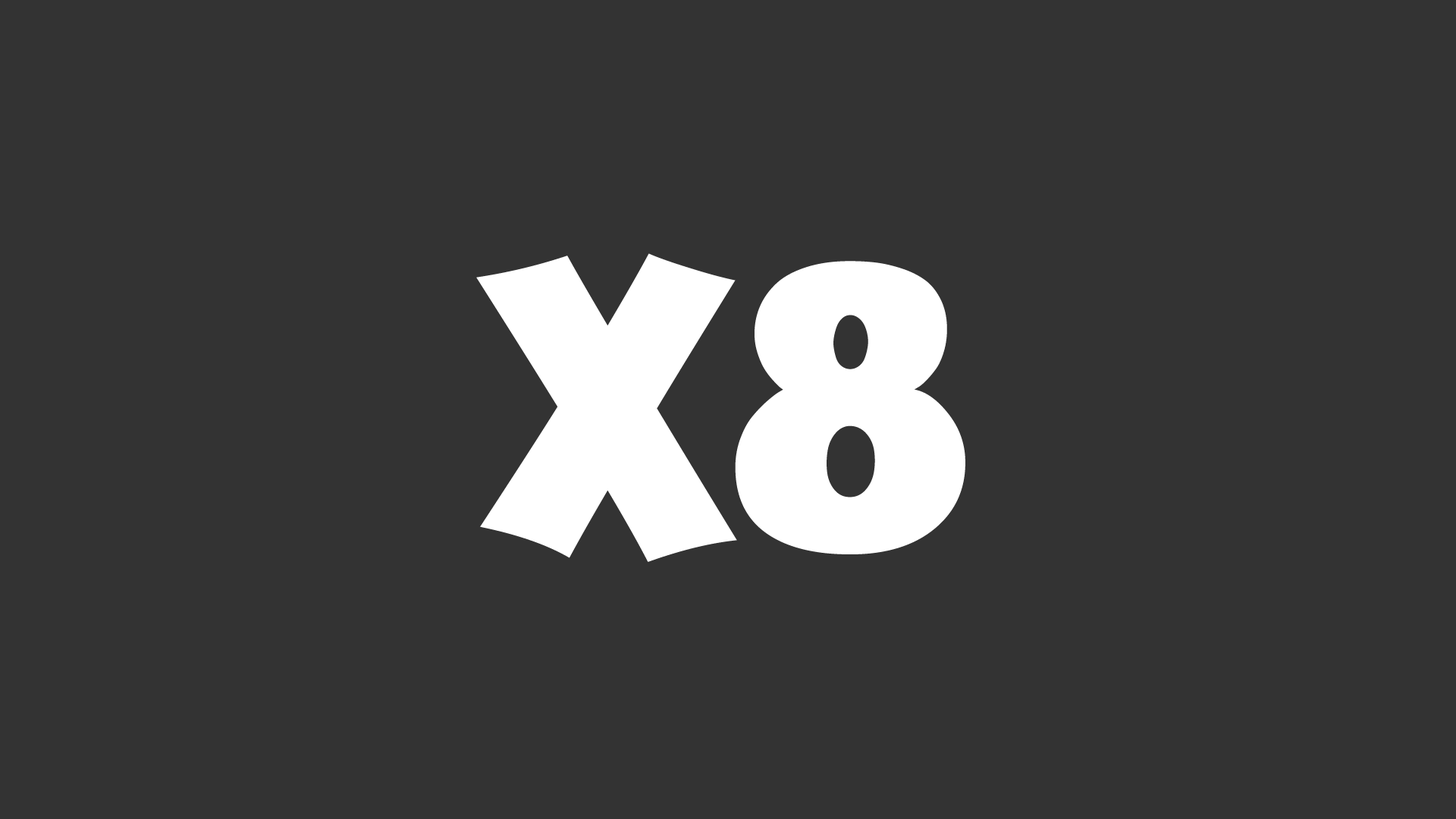
<style>
.page{position:relative;width:1456px;height:819px;background:#333333}
.page>*{position:absolute;margin:0}
.t1{font:416.9px "TheHoundRegular";letter-spacing:-0.02em;color:#ffffff}
</style>
<div class="page">
<p class="t1" style="left:476px;top:253px;width:489px;height:309px">X8</p>
</div>
